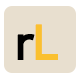
<style>
.page{position:relative;width:80px;height:80px;background:#e8dfcf}
.page>*{position:absolute;margin:0}
.t1{font:50px "BerlinBold";color:#000000}
.t2{font:50px "BerlinBold";color:#fac030}
</style>
<div class="page">
<p class="t1" style="left:17px;top:24px;width:41px;height:36px">r<span class="t2">L</span></p>
</div>
